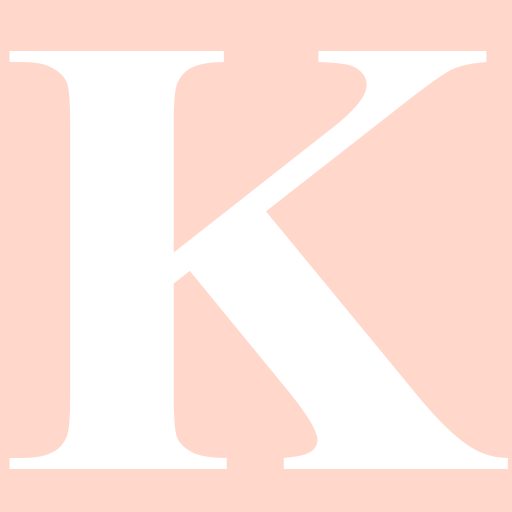
<style>
.page{position:relative;width:512px;height:512px;background:#ffd8cb}
.page>*{position:absolute;margin:0}
.t1{font:630.5px "TimesNewRomanPS-BoldMT";color:#ffffff;scale:1.03 1}
</style>
<div class="page">
<p class="t1" style="left:9px;top:51px;width:499px;height:418px">K</p>
</div>
